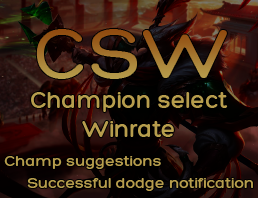
<style>
.page{position:relative;width:258px;height:198px}
.page>*{position:absolute;margin:0}
.t1{font:79.6px "Hero-Bold";color:#4c4c4c}
.t2{font:24px "Hero-Bold";color:#4c4c4c}
.t3{font:16px "Hero-Bold";color:#4c4c4c}
</style>
<div class="page">
<p class="t1" style="left:35px;top:28px;width:193px;height:52px">CSW</p>
<p class="t2" style="left:31px;top:92px;width:197px;height:45px;text-align:center">Champion select<br>Winrate</p>
<p class="t3" style="left:4px;top:156px;width:157px;height:13px">Champ suggestions</p>
<p class="t3" style="left:27px;top:178px;width:226px;height:13px">Successful dodge notification</p>
</div>
